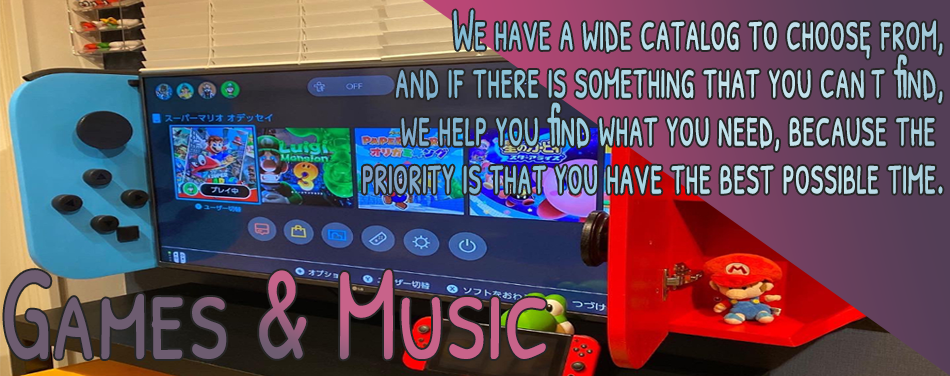
<style>
.page{position:relative;width:950px;height:376px}
.page>*{position:absolute;margin:0}
.t1{font:59.9px/47.9px "PatrickHandSC-Regular";scale:0.57 1}
.t2{font:133.6px "PatrickHandSC-Regular";scale:0.79 1}
</style>
<div class="page">
<p class="t1" style="left:363px;top:9px;width:580px;height:185px;text-align:right">We have a wide catalog to choose from,<br>and if there is something that you can't find,<br> we help you find what you need, because the <br>priority is that you have the best possible time.</p>
<p class="t2" style="left:4px;top:269px;width:542px;height:91px">Games &amp; Music</p>
</div>
